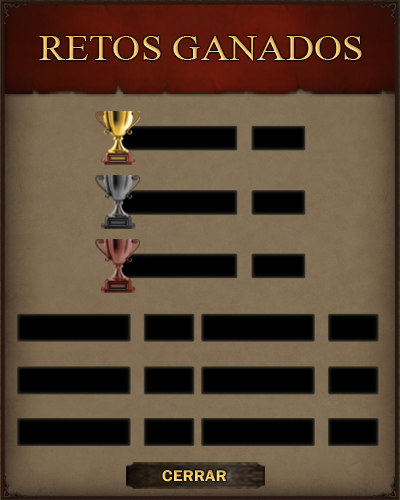
<style>
.page{position:relative;width:400px;height:500px}
.page>*{position:absolute;margin:0}
.t1{font:36px "TimesNewRomanPSMT";scale:1.09 1}
.t2{font:16px "FranklinGothic-Demi";scale:1.07 1}
</style>
<div class="page">
<p class="t1" style="left:39px;top:36px;width:323px;height:25px">RETOS GANADOS</p>
<p class="t2" style="left:162px;top:470px;width:64px;height:12px">CERRAR</p>
</div>
